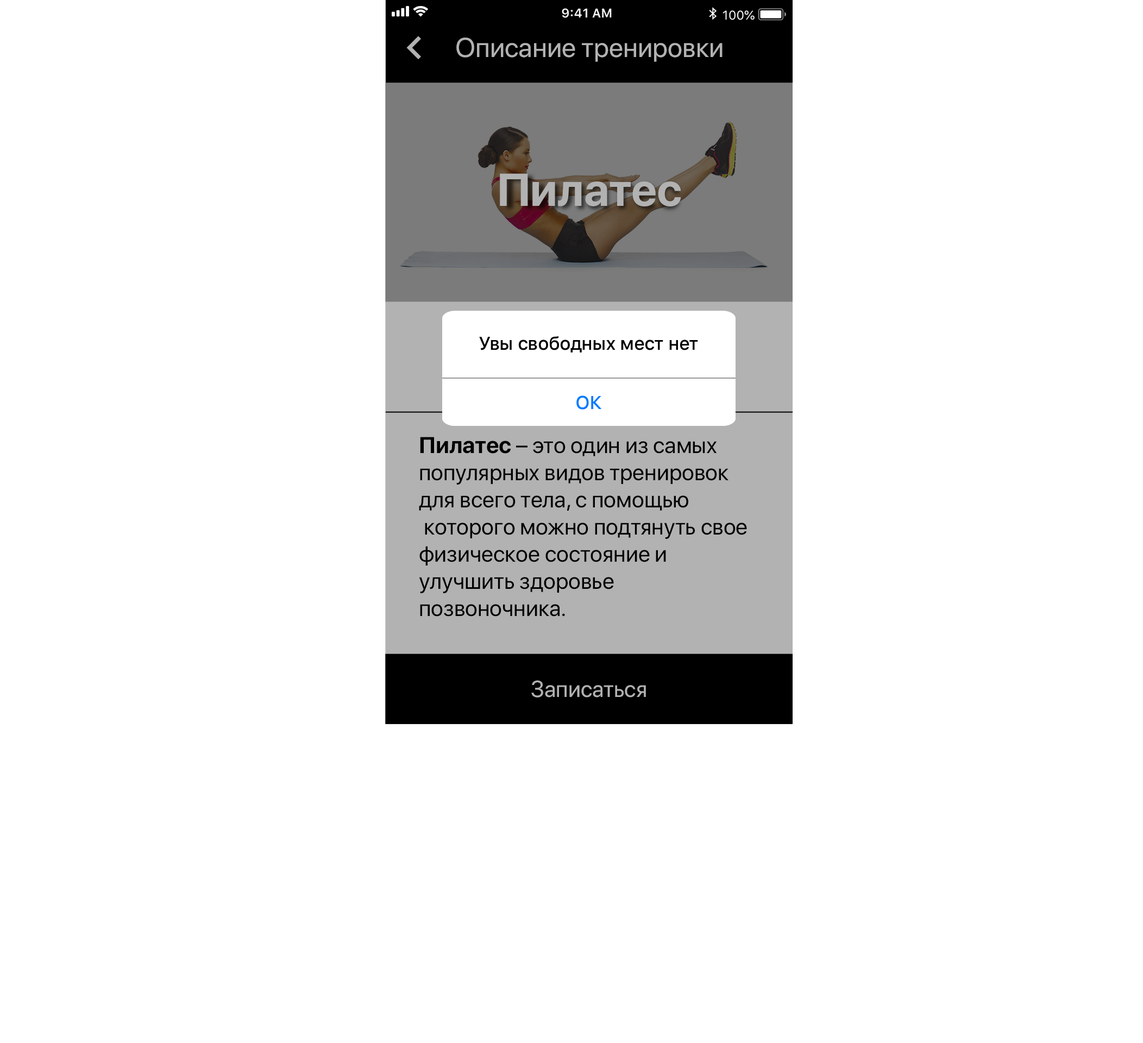
<style>
.page{position:relative;width:1143px;height:1043px;background:#ffffff}
.page>*{position:absolute;margin:0}
.t1{font:27.2px "SFProDisplay-Regular";color:#b2b2b2}
.t2{font:45.6px "SFProDisplay-Bold";color:#b2b2b2}
.t3{font:18.5px "SFProText-Medium";letter-spacing:-0.024em;color:#030303}
.t4{font:18.5px "SFProText-Medium";letter-spacing:-0.024em;color:#007aff}
.t5{font:22.8px/27.2px "SFProDisplay-Regular";color:#000000}
.t6{font:22.8px/27.2px "SFProDisplay-Bold";color:#000000}
.t7{font:22.8px "SFProDisplay-Regular";color:#b2b2b2}
</style>
<div class="page">
<p class="t1" style="left:456px;top:37px;width:267px;height:25px">Описание тренировки</p>
<p class="t2" style="left:500px;top:173px;width:181px;height:33px">Пилатес</p>
<p class="t3" style="left:479px;top:336px;width:219px;height:17px">Увы свободных мест нет</p>
<p class="t4" style="left:576px;top:396px;width:26px;height:14px">ОК</p>
<p class="t5" style="left:419px;top:437px;width:328px;height:180px"><span class="t6">Пилатес</span> – это один из самых <br>популярных видов тренировок <br>для всего тела, с помощью<br> которого можно подтянуть свое <br>физическое состояние и <br>улучшить здоровье <br>позвоночника.</p>
<p class="t7" style="left:531px;top:680px;width:115px;height:18px">Записаться</p>
</div>
